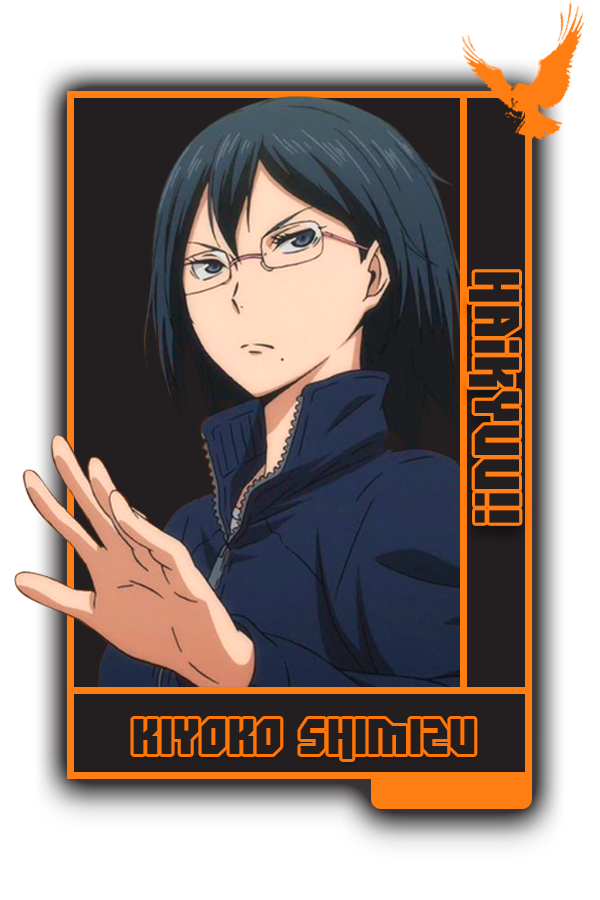
<style>
.page{position:relative;width:600px;height:900px;background:#ffffff}
.page>*{position:absolute;margin:0}
.t1{font:62.9px "Dimitri";color:#231f20}
.t2{font:50.5px "Dimitri";color:#231f20}
</style>
<div class="page">
<p class="t1" style="left:469px;top:272px;width:51px;height:251px;rotate:90deg">Haikyuu!!</p>
<p class="t2" style="left:133px;top:719px;width:342px;height:40px">KIYOKO SHIMIZU</p>
</div>
